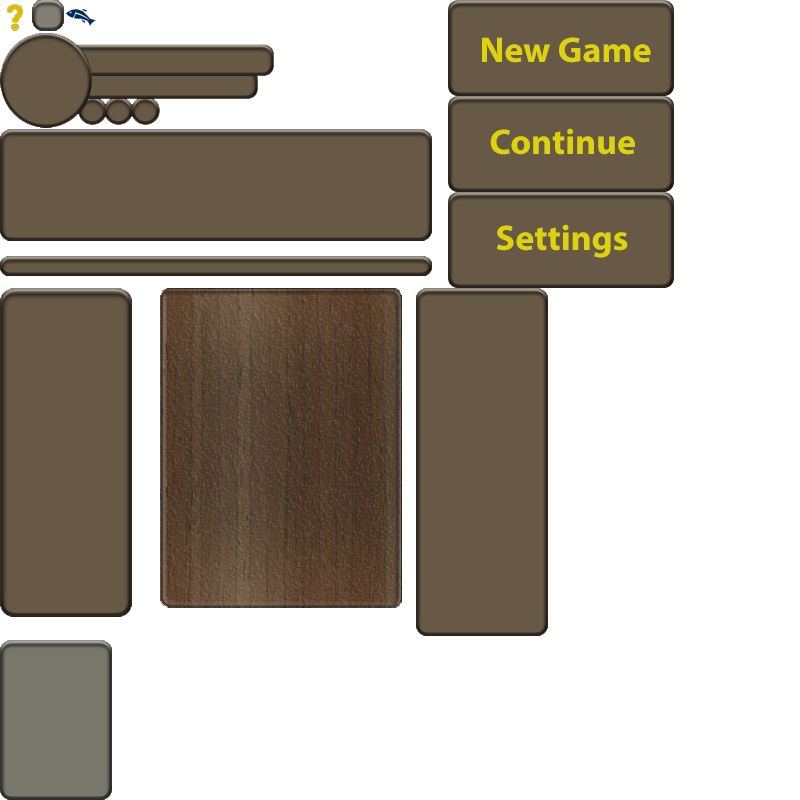
<style>
.page{position:relative;width:800px;height:800px;background:#ffffff}
.page>*{position:absolute;margin:0}
.t1{font:36px "MyriadPro-Bold";color:#ddd20c}
</style>
<div class="page">
<p class="t1" style="left:482px;top:37px;width:169px;height:26px">New Game</p>
<p class="t1" style="left:490px;top:128px;width:145px;height:27px">Continue</p>
<p class="t1" style="left:497px;top:224px;width:131px;height:34px">Settings</p>
</div>
